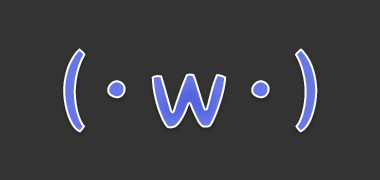
<style>
.page{position:relative;width:380px;height:180px;background:#333333}
.page>*{position:absolute;margin:0}
.t1{font:100px "KFhimaji";letter-spacing:-0.28em}
</style>
<div class="page">
<p class="t1" style="left:63px;top:48px;width:255px;height:85px">（・ｗ・）</p>
</div>
